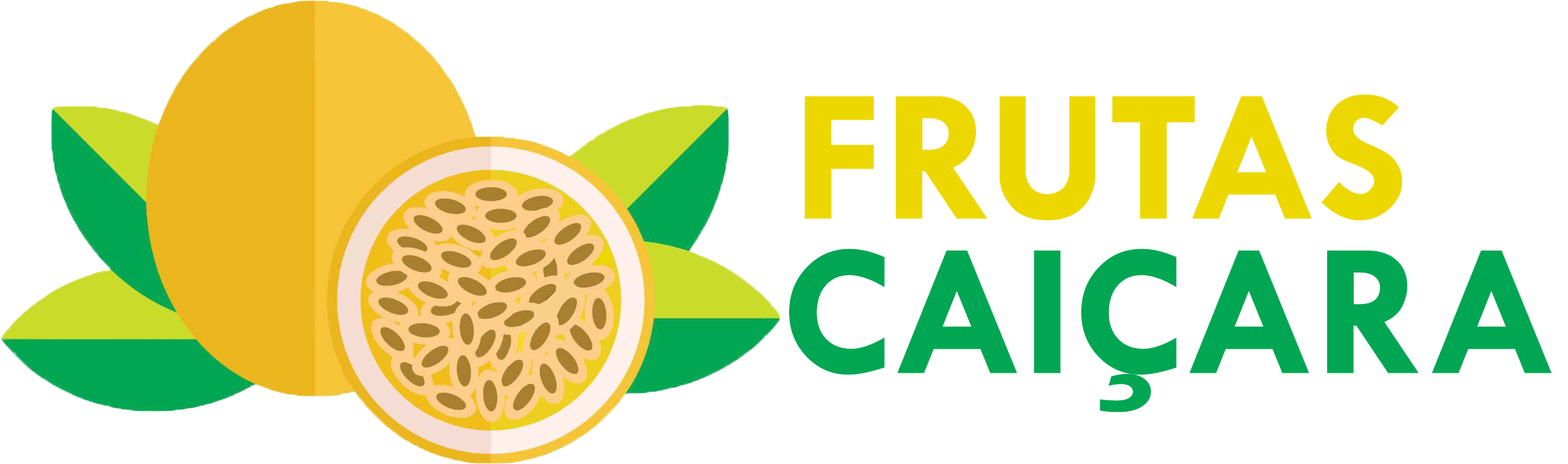
<style>
.page{position:relative;width:1568px;height:464px;background:#ffffff}
.page>*{position:absolute;margin:0}
.t1{font:190.8px "TwCenMT-Bold";color:#ecd800}
.t2{font:190.8px "TwCenMT-Bold";color:#00a652}
</style>
<div class="page">
<p class="t1" style="left:804px;top:94px;width:598px;height:126px">FRUTAS</p>
<p class="t2" style="left:789px;top:249px;width:763px;height:164px">CAIÇARA</p>
</div>
